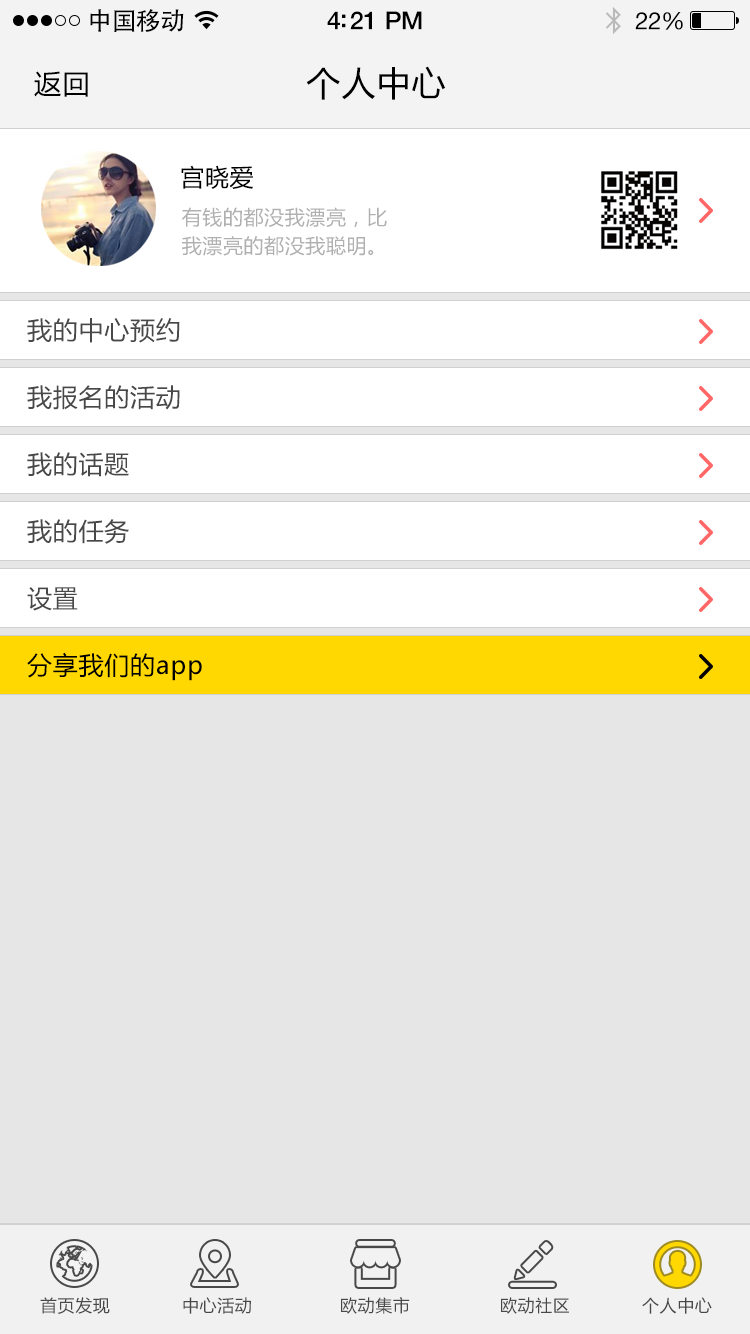
<style>
.page{position:relative;width:750px;height:1334px;background:#e6e6e6}
.page>*{position:absolute;margin:0}
.t1{font:25px "AdobeHeitiStd-Regular";letter-spacing:-0.025em;color:#000000}
.t2{font:25px "HelveticaNeue-Medium";letter-spacing:-0.02em;color:#000000}
.t3{font:24px "HelveticaNeue";letter-spacing:-0.02em;color:#000000}
.t4{font:27px "MicrosoftYaHei";letter-spacing:0.05em;color:#000000}
.t5{font:34px "MicrosoftYaHei";letter-spacing:0.03em;color:#000000}
.t6{font:24px "MicrosoftYaHei";letter-spacing:0.03em;color:#000000}
.t7{font:20px/70px "MicrosoftYaHei";letter-spacing:0.03em;color:#b0b0b0}
.t8{font:25px "MicrosoftYaHei";letter-spacing:0.03em;color:#555555}
.t9{font:25px "MicrosoftYaHei";letter-spacing:0.03em;color:#000000}
.t10{font:17px "MicrosoftYaHei";letter-spacing:0.03em;color:#484848}
</style>
<div class="page">
<p class="t1" style="left:90px;top:9px;width:94px;height:23px">中国移动</p>
<p class="t2" style="left:327px;top:11px;width:95px;height:19px">4:21 PM</p>
<p class="t3" style="left:635px;top:12px;width:48px;height:18px">22%</p>
<p class="t4" style="left:34px;top:71px;width:54px;height:26px">返回</p>
<p class="t5" style="left:306px;top:66px;width:140px;height:34px">个人中心</p>
<p class="t6" style="left:181px;top:165px;width:73px;height:24px">宫晓爱</p>
<p class="t7" style="left:182px;top:207px;width:205px;height:49px">有钱的都没我漂亮，比<br>我漂亮的都没我聪明。</p>
<p class="t8" style="left:27px;top:318px;width:153px;height:25px">我的中心预约</p>
<p class="t8" style="left:27px;top:385px;width:153px;height:25px">我报名的活动</p>
<p class="t8" style="left:27px;top:452px;width:102px;height:25px">我的话题</p>
<p class="t8" style="left:27px;top:519px;width:102px;height:25px">我的任务</p>
<p class="t8" style="left:27px;top:587px;width:51px;height:24px">设置</p>
<p class="t9" style="left:27px;top:652px;width:175px;height:29px">分享我们的app</p>
<p class="t10" style="left:40px;top:1297px;width:70px;height:17px">首页发现</p>
<p class="t10" style="left:183px;top:1297px;width:68px;height:17px">中心活动</p>
<p class="t10" style="left:341px;top:1297px;width:69px;height:17px">欧动集市</p>
<p class="t10" style="left:501px;top:1297px;width:68px;height:17px">欧动社区</p>
<p class="t10" style="left:642px;top:1297px;width:70px;height:17px">个人中心</p>
</div>
